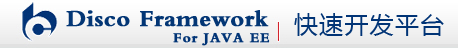
<style>
.page{position:relative;width:458px;height:48px}
.page>*{position:absolute;margin:0}
.t1{font:24px "FZDBSJW--GB1-0";color:#033675;font-weight:bold}
.t2{font:24px "MicrosoftYaHei";letter-spacing:0.05em;color:#013476}
.t3{font:14px "FZDBSJW--GB1-0";letter-spacing:0.05em;color:#013476;font-weight:bold}
</style>
<div class="page">
<p class="t1" style="left:66px;top:10px;width:203px;height:17px">Disco Framework</p>
<p class="t2" style="left:294px;top:13px;width:150px;height:23px">快速开发平台</p>
<p class="t3" style="left:173px;top:32px;width:97px;height:14px">For JAVA EE</p>
</div>
